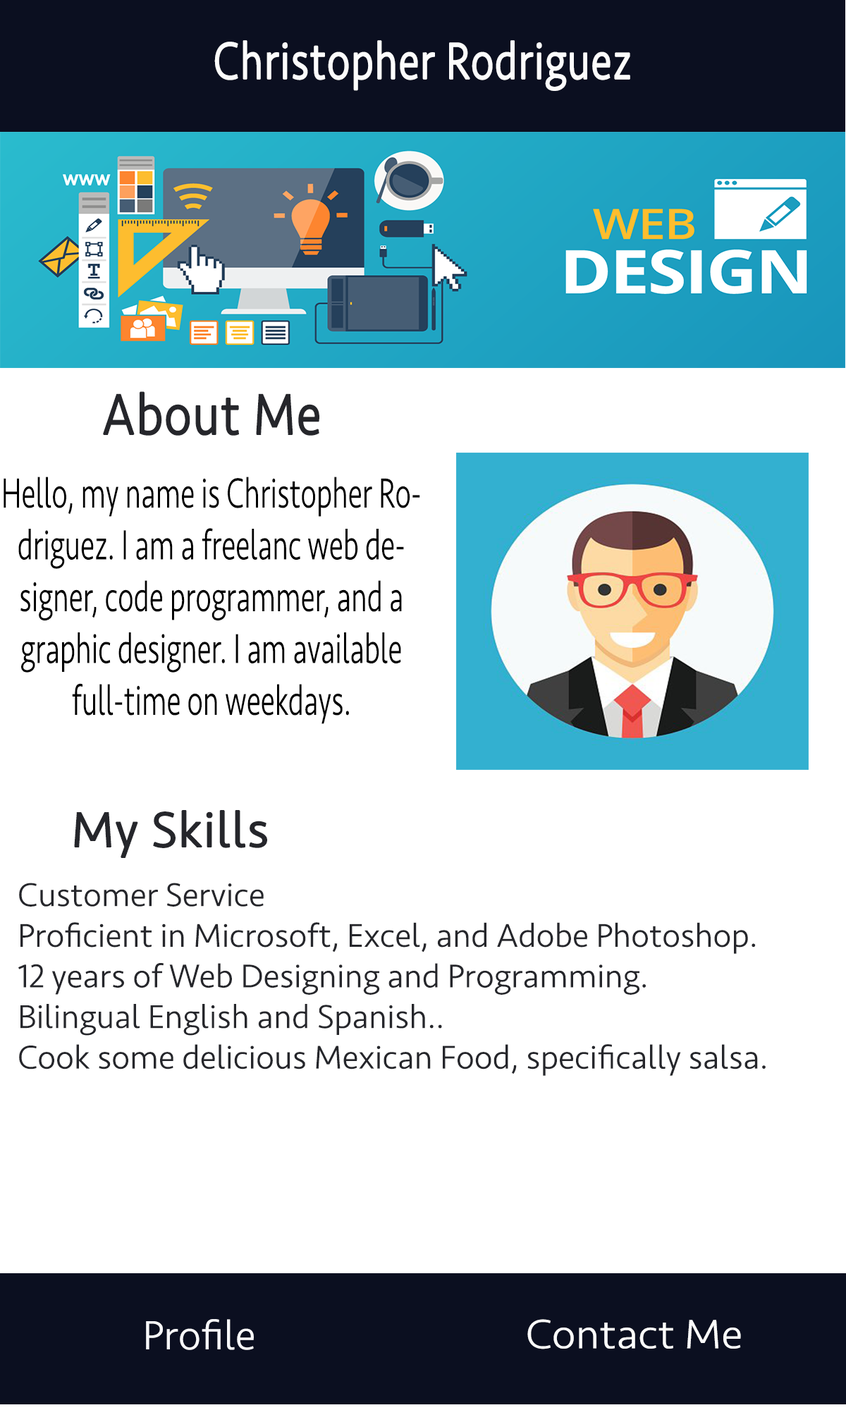
<style>
.page{position:relative;width:846px;height:1410px;background:#ffffff}
.page>*{position:absolute;margin:0}
.t1{font:53.2px "Seravek-Light";color:#fcfcfc;font-weight:bold;scale:0.8 1}
.t2{font:58.9px "Seravek-Light";color:#25262b;font-weight:bold;scale:0.85 1}
.t3{font:43.2px "Seravek-Light";color:#000000;scale:0.68 1}
.t4{font:50.8px "Seravek-Light";color:#25262b;font-weight:bold}
.t5{font:33.8px "Seravek-Light";color:#25262b}
.t6{font:42.3px "Seravek-Light";color:#f8f8fa}
.t7{font:42.3px "Seravek-Light";color:#fcfcfc;scale:1.05 1}
</style>
<div class="page">
<p class="t1" style="left:214px;top:40px;width:416px;height:51px">Christopher Rodriguez</p>
<p class="t2" style="left:103px;top:391px;width:216px;height:45px">About Me</p>
<p class="t3" style="left:4px;top:476px;width:416px;height:248px;text-align:center">Hello, my name is Christopher Rodriguez. I am a freelanc web designer, code programmer, and a graphic designer. I am available full-time on weekdays.</p>
<p class="t4" style="left:74px;top:810px;width:193px;height:48px">My Skills</p>
<p class="t5" style="left:18px;top:883px;width:747px;height:193px">Customer Service<br>Proficient in Microsoft, Excel, and Adobe Photoshop.<br>12 years of Web Designing and Programming.<br>Bilingual English and Spanish..<br>Cook some delicious Mexican Food, specifically salsa.</p>
<p class="t6" style="left:146px;top:1319px;width:108px;height:31px">Profile</p>
<p class="t7" style="left:527px;top:1319px;width:214px;height:30px">Contact Me</p>
</div>
